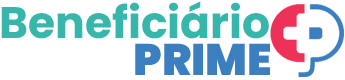
<style>
.page{position:relative;width:345px;height:80px;background:#ffffff}
.page>*{position:absolute;margin:0}
.t1{font:44px "Poppins-Bold";color:#37b6ab}
.t2{font:44px "Poppins-Black";color:#3c7fc1}
</style>
<div class="page">
<p class="t1" style="left:1px;top:1px;width:268px;height:38px">Beneficiário</p>
<p class="t2" style="left:135px;top:43px;width:135px;height:32px">PRIME</p>
</div>
